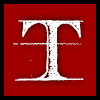
<style>
.page{position:relative;width:100px;height:100px;background:#a00000}
.page>*{position:absolute;margin:0}
.t1{font:72px "handwriting-draft_free-version";color:#ffffff}
</style>
<div class="page">
<p class="t1" style="left:13px;top:20px;width:71px;height:61px">T</p>
</div>
